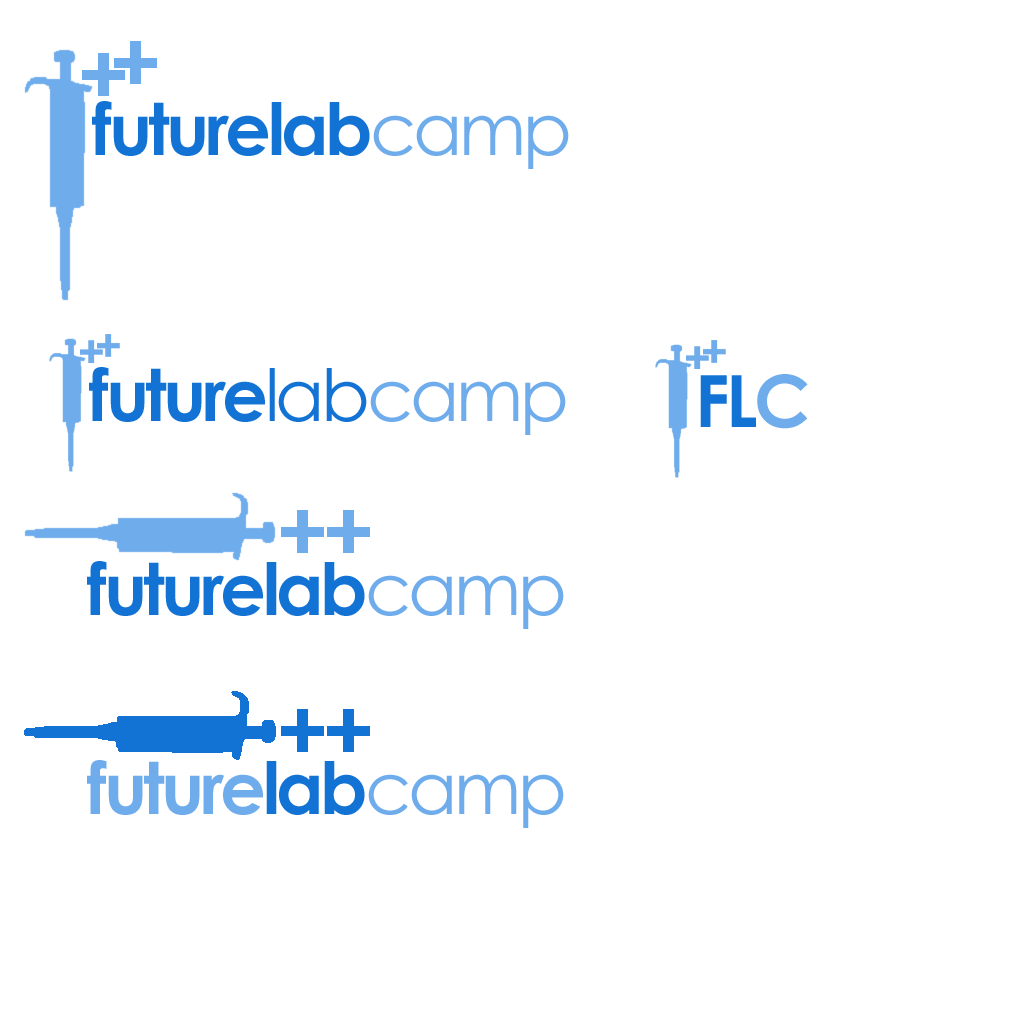
<style>
.page{position:relative;width:1024px;height:1024px;background:#ffffff}
.page>*{position:absolute;margin:0}
.t1{font:72px "CenturyGothic-Bold";letter-spacing:-0.05em;color:#1373d5}
.t2{font:72px "CenturyGothic";letter-spacing:-0.05em;color:#6faceb}
.t3{font:72px "CenturyGothic";letter-spacing:-0.05em;color:#1373d5}
.t4{font:72px "CenturyGothic-Bold";letter-spacing:-0.05em;color:#6faceb}
</style>
<div class="page">
<p class="t1" style="left:92px;top:101px;width:278px;height:55px">futurelab</p>
<p class="t2" style="left:373px;top:115px;width:196px;height:54px">camp</p>
<p class="t1" style="left:89px;top:367px;width:278px;height:55px">future<span class="t3">lab</span></p>
<p class="t1" style="left:700px;top:374px;width:108px;height:55px">FL<span class="t4">C</span></p>
<p class="t2" style="left:370px;top:381px;width:196px;height:54px">camp</p>
<p class="t1" style="left:87px;top:561px;width:278px;height:55px">futurelab</p>
<p class="t2" style="left:368px;top:575px;width:196px;height:54px">camp</p>
<p class="t4" style="left:87px;top:760px;width:278px;height:55px">future<span class="t1">lab</span></p>
<p class="t2" style="left:368px;top:774px;width:196px;height:54px">camp</p>
</div>
